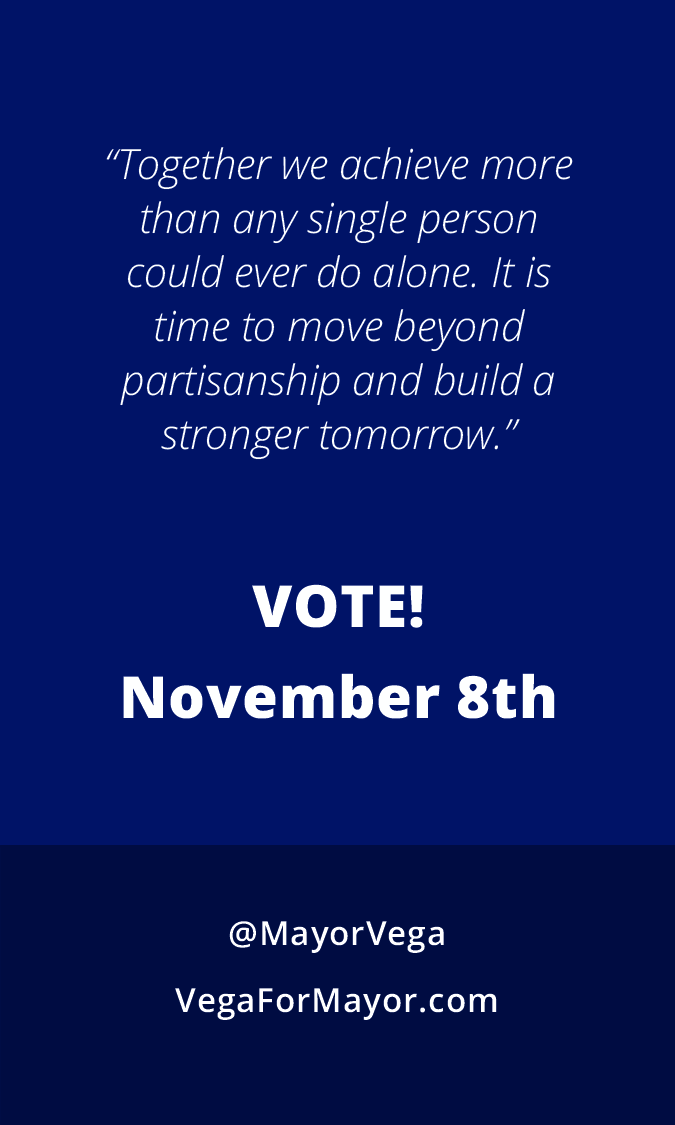
<style>
.page{position:relative;width:675px;height:1125px;background:#001367}
.page>*{position:absolute;margin:0}
.t1{font:41.7px/54.2px "OpenSansLight-Italic";color:#feffff}
.t2{font:58.3px/91.7px "OpenSans-Extrabold";letter-spacing:0.01em;color:#feffff}
.t3{font:33.3px/66.7px "OpenSans-Semibold";letter-spacing:0.025em;color:#ffffff}
</style>
<div class="page">
<p class="t1" style="left:106px;top:147px;width:467px;height:313px;text-align:center">“Together we achieve more than any single person could ever do alone. It is time to move beyond partisanship and build a stronger tomorrow.”</p>
<p class="t2" style="left:123px;top:584px;width:432px;height:135px;text-align:center">VOTE!<br>November 8th</p>
<p class="t3" style="left:175px;top:921px;width:322px;height:99px;text-align:center">@MayorVega<br>VegaForMayor.com</p>
</div>
